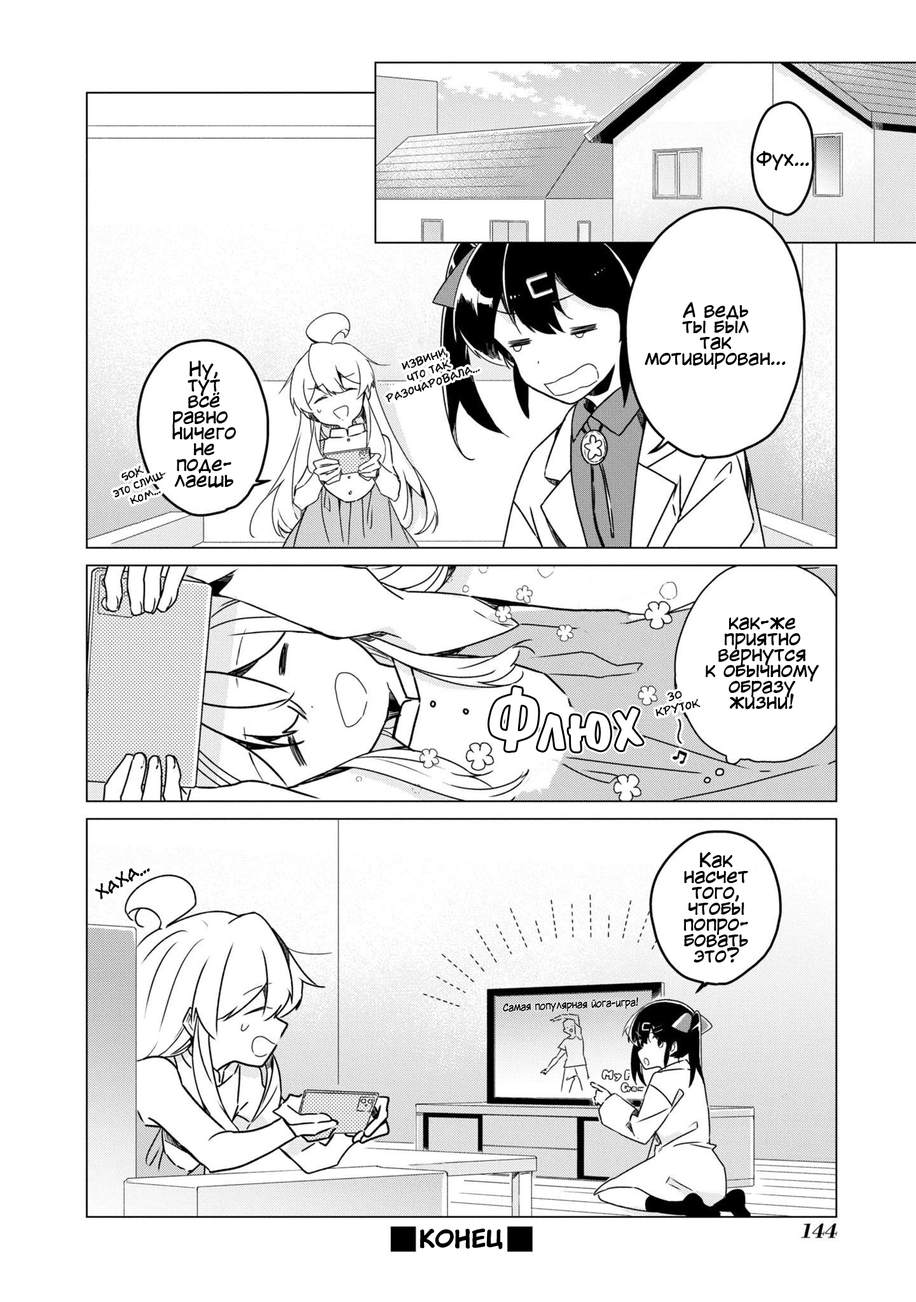
<style>
.page{position:relative;width:916px;height:1302px;background:#ffffff}
.page>*{position:absolute;margin:0}
.t1{font:19.1px "KuraiVoice2";color:#000000}
.t2{font:19.1px/15.9px "KuraiVoice2";color:#000000}
.t3{font:12.7px/12.7px "el_CCEvilSchemes";color:#000000}
.t4{font:12.1px/12.7px "el_CCEvilSchemes";color:#000000}
.t5{font:76.3px "ADomIno";color:#ffffff}
.t6{font:19.1px "el_CCEvilSchemes";color:#000000}
.t7{font:10.2px "KuraiVoice2";color:#000000;scale:0.89 1}
.t8{font:22.9px "KuraiVoice2-Bold";color:#000000}
</style>
<div class="page">
<p class="t1" style="left:756px;top:151px;width:53px;height:19px">Фух...</p>
<p class="t2" style="left:645px;top:302px;width:141px;height:67px;text-align:center">А ведь<br>ты был<br>так<br>мотивирован...</p>
<p class="t3" style="left:385px;top:348px;width:95px;height:54px;text-align:center;rotate:-19deg">Извини,<br>что так<br>разочаровала...</p>
<p class="t2" style="left:172px;top:360px;width:64px;height:128px;text-align:center">Ну,<br>тут<br>всё<br>равно <br>ничего<br>не<br>поде-<br>лаешь</p>
<p class="t4" style="left:113px;top:465px;width:53px;height:39px;text-align:center;rotate:-23deg">50,к <br>это слиш-<br>ком..<span class="t3">.</span></p>
<p class="t2" style="left:706px;top:617px;width:113px;height:92px;text-align:center">как-же<br>приятно<br>вернутся<br>к обычному<br>образу<br>жизни!</p>
<p class="t5" style="left:489px;top:687px;width:154px;height:65px">Флюх</p>
<p class="t3" style="left:655px;top:690px;width:45px;height:26px;text-align:center;rotate:-13deg">30<br>круток</p>
<p class="t2" style="left:683px;top:852px;width:65px;height:110px;text-align:center">Как<br>насчет<br>того,<br>чтобы<br>попро-<br>бовать<br>это?</p>
<p class="t6" style="left:95px;top:868px;width:55px;height:31px;rotate:-31deg">Хаха...</p>
<p class="t7" style="left:503px;top:997px;width:136px;height:15px;rotate:-2deg">Самая популярная йога-игра!</p>
<p class="t8" style="left:420px;top:1228px;width:83px;height:21px">КОНЕЦ</p>
</div>
